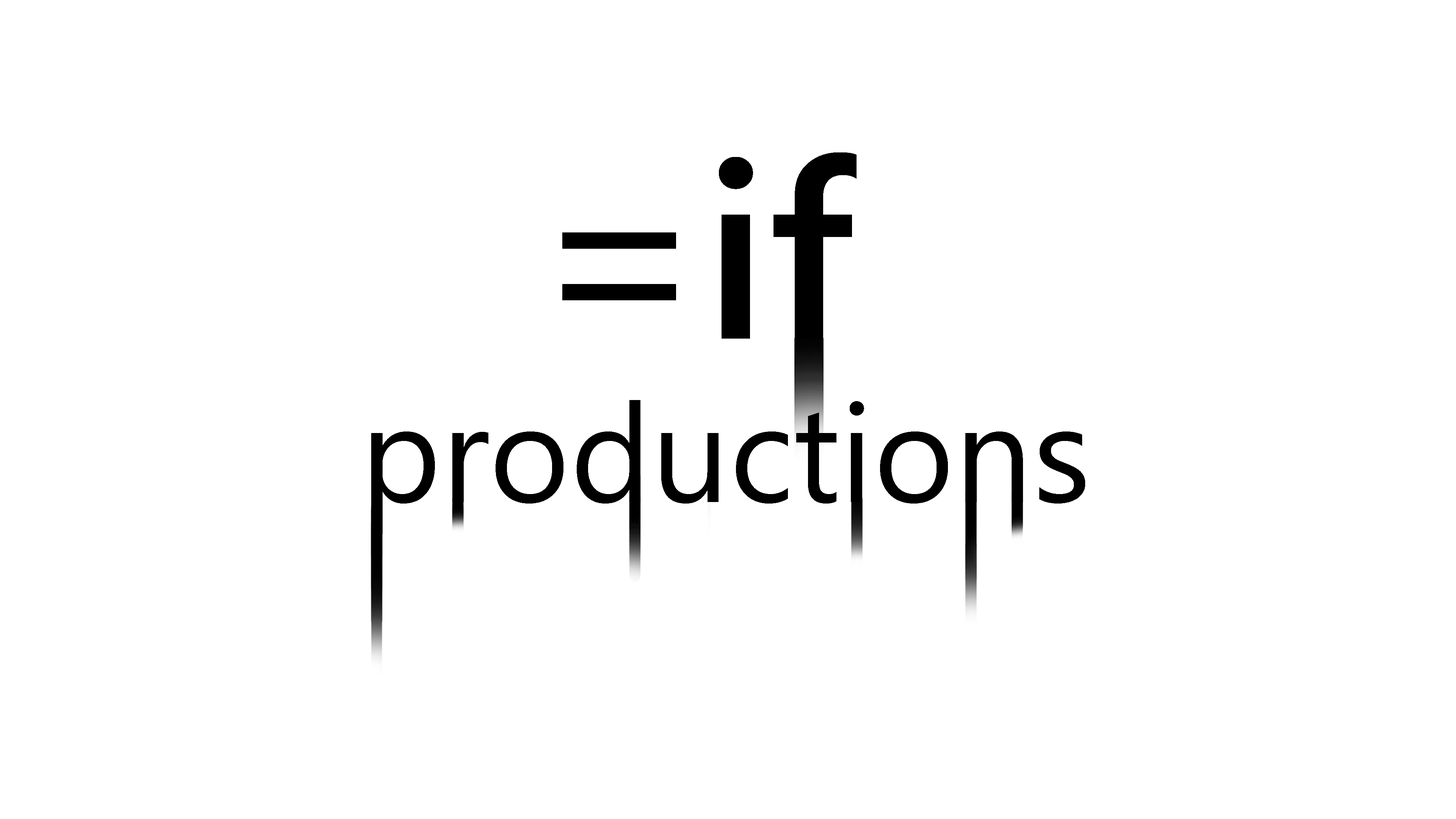
<style>
.page{position:relative;width:1456px;height:819px;background:#ffffff}
.page>*{position:absolute;margin:0}
.t1{font:247.3px "YuGothicUI-Bold";color:#000000}
.t2{font:247.3px "YuGothicUI-Regular";color:#000000}
.t3{font:138px "YuGothicUI-Regular";color:#000000}
</style>
<div class="page">
<p class="t1" style="left:562px;top:152px;width:295px;height:187px"><span class="t2">=</span>if</p>
<p class="t3" style="left:371px;top:400px;width:714px;height:134px">productions</p>
</div>
